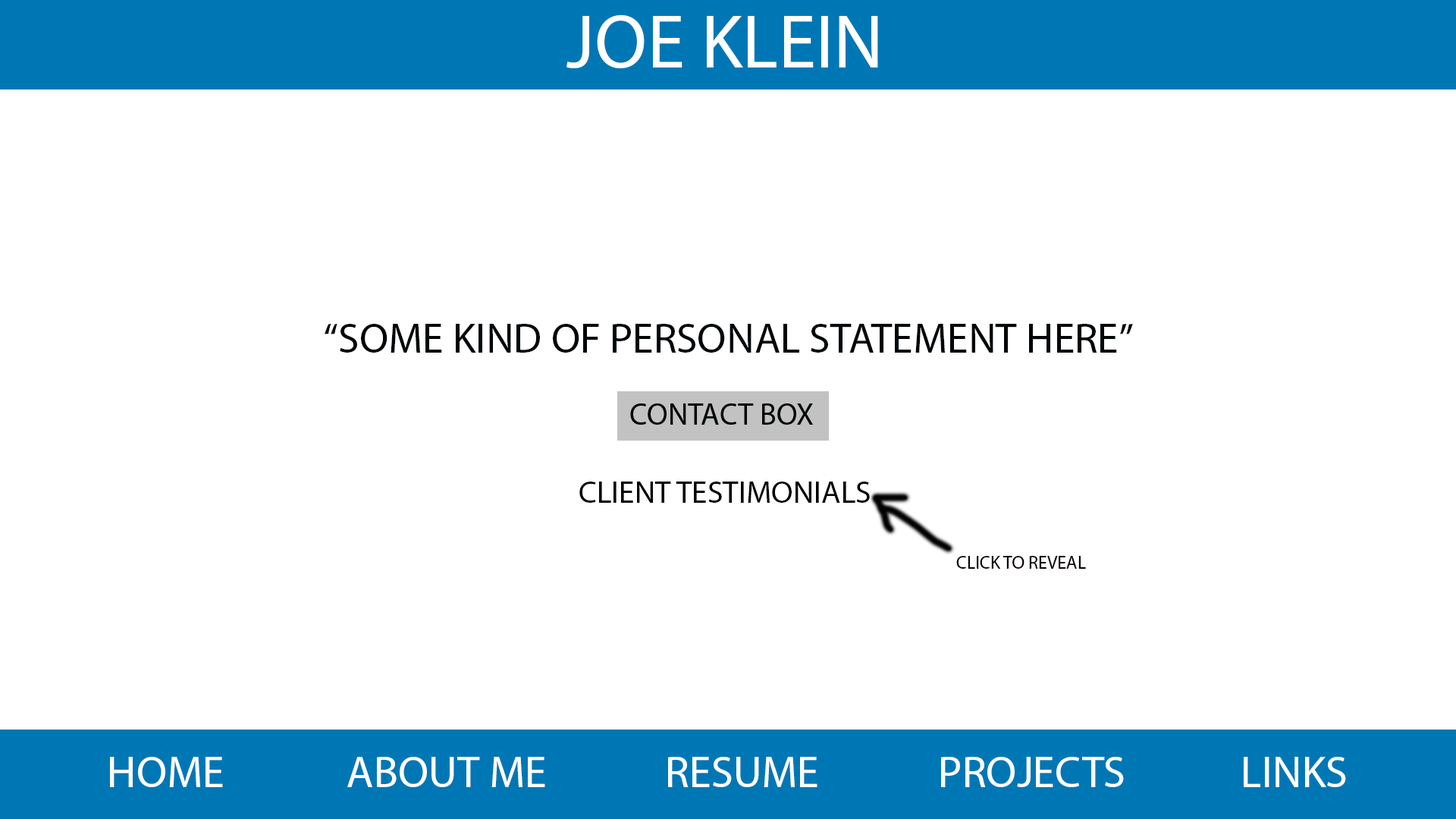
<style>
.page{position:relative;width:1456px;height:819px;background:#ffffff}
.page>*{position:absolute;margin:0}
.t1{font:76.2px "MyriadPro-Regular";color:#ffffff}
.t2{font:42.5px "MyriadPro-Regular";color:#000508}
.t3{font:31.5px "MyriadPro-Regular";color:#050000}
.t4{font:18.2px "MyriadPro-Regular";color:#090000}
.t5{font:44.4px "MyriadPro-Regular";color:#ffffff}
</style>
<div class="page">
<p class="t1" style="left:566px;top:14px;width:312px;height:55px">JOE KLEIN</p>
<p class="t2" style="left:325px;top:324px;width:808px;height:29px">“SOME KIND OF PERSONAL STATEMENT HERE”</p>
<p class="t3" style="left:579px;top:482px;width:291px;height:21px">CLIENT TESTIMONIALS</p>
<p class="t4" style="left:956px;top:556px;width:130px;height:13px">CLICK TO REVEAL</p>
<p class="t5" style="left:110px;top:757px;width:113px;height:30px">HOME</p>
<p class="t5" style="left:347px;top:757px;width:198px;height:30px">ABOUT ME</p>
<p class="t5" style="left:668px;top:757px;width:149px;height:30px">RESUME</p>
<p class="t5" style="left:941px;top:757px;width:183px;height:30px">PROJECTS</p>
<p class="t5" style="left:1244px;top:757px;width:102px;height:30px">LINKS</p>
</div>
